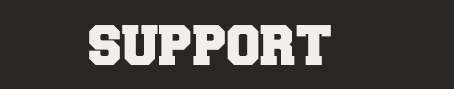
<style>
.page{position:relative;width:454px;height:89px;background:#2b2626}
.page>*{position:absolute;margin:0}
.t1{font:60px "Freshman";letter-spacing:-0.015em;color:#f2eeee}
</style>
<div class="page">
<p class="t1" style="left:89px;top:25px;width:242px;height:40px">support</p>
</div>
